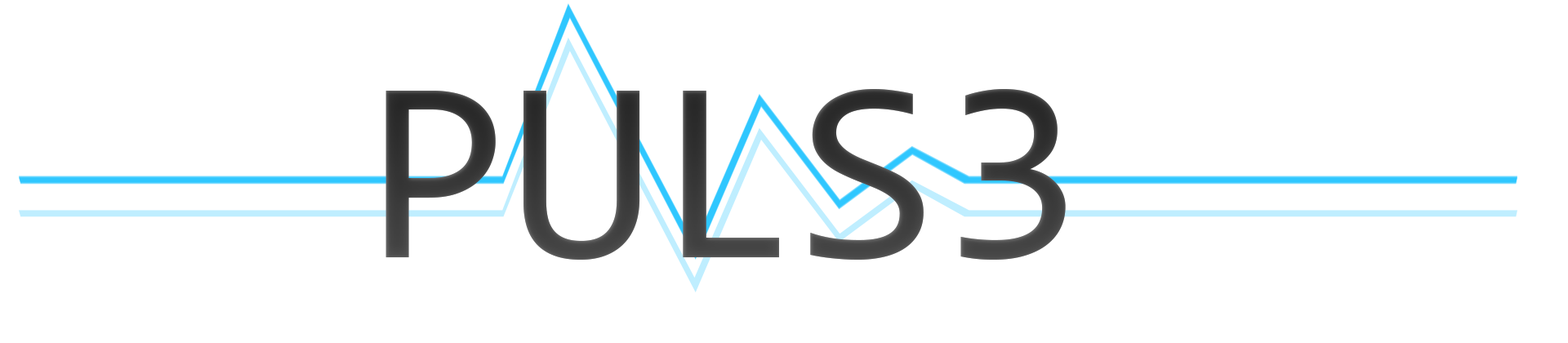
<style>
.page{position:relative;width:1568px;height:343px;background:#ffffff}
.page>*{position:absolute;margin:0}
.t1{font:260.9px "Consolas";color:#282828}
</style>
<div class="page">
<p class="t1" style="left:385px;top:89px;width:681px;height:171px">PULS3</p>
<p class="t1" style="left:385px;top:89px;width:681px;height:171px;opacity:0.33">PULS3</p>
</div>
